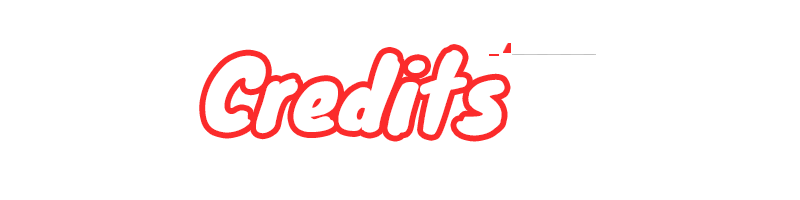
<style>
.page{position:relative;width:800px;height:200px;background:#ffffff}
.page>*{position:absolute;margin:0}
.t1{font:93.2px "Knewave-Regular";color:#ffffff}
</style>
<div class="page">
<p class="t1" style="left:205px;top:50px;width:300px;height:86px">Credits</p>
</div>
